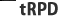
<style>
.page{position:relative;width:59px;height:16px;background:#ffffff}
.page>*{position:absolute;margin:0}
.t1{font:16px "AdobeGothicStd-Bold";color:#303030;font-weight:bold}
</style>
<div class="page">
<p class="t1" style="left:19px;top:2px;width:39px;height:14px">tRPD</p>
</div>
